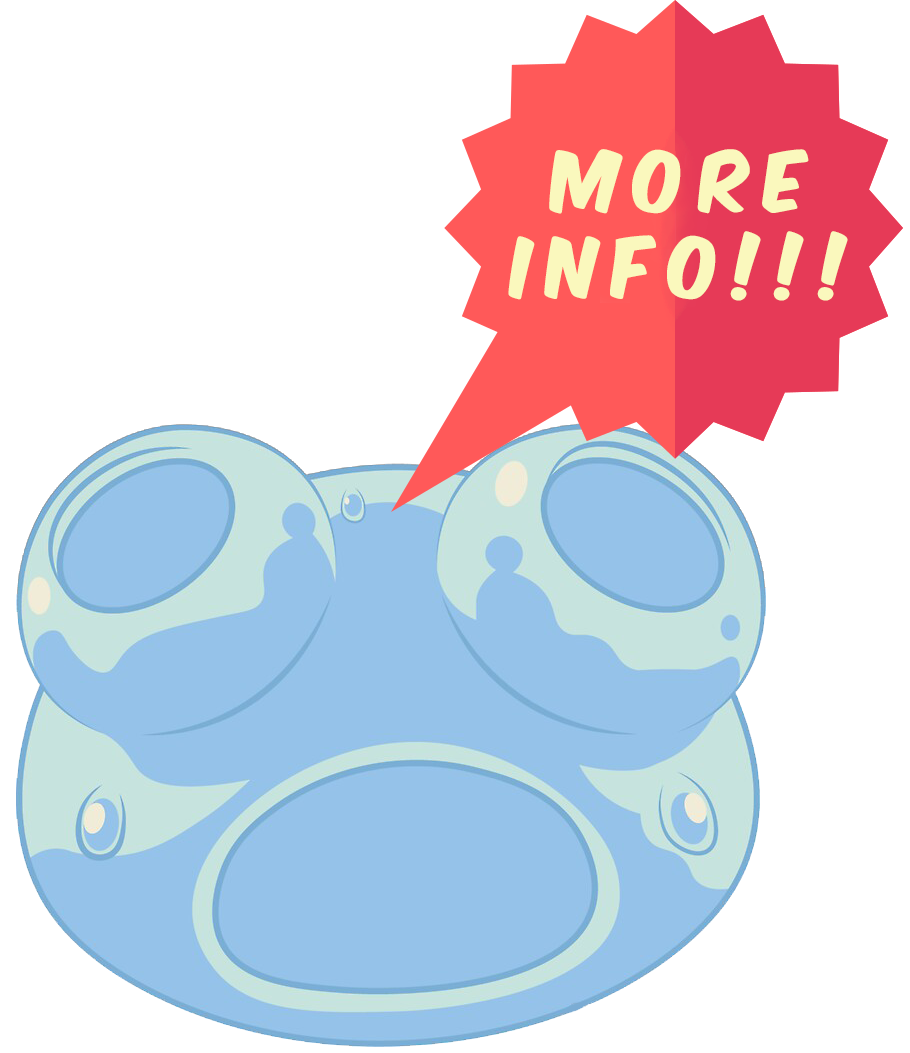
<style>
.page{position:relative;width:910px;height:1053px;background:#ffffff}
.page>*{position:absolute;margin:0}
.t1{font:72px "KomikaAxis";letter-spacing:0.2em;color:#faf8bd}
</style>
<div class="page">
<p class="t1" style="left:508px;top:149px;width:340px;height:152px;text-align:center">More<br>info!!!</p>
</div>
